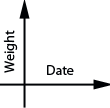
<style>
.page{position:relative;width:110px;height:108px;background:#ffffff}
.page>*{position:absolute;margin:0}
.t1{font:14.1px "MyriadPro-Regular";color:#000205}
</style>
<div class="page">
<p class="t1" style="left:3px;top:30px;width:15px;height:43px;rotate:-89deg">Weight</p>
<p class="t1" style="left:47px;top:65px;width:27px;height:10px">Date</p>
</div>
